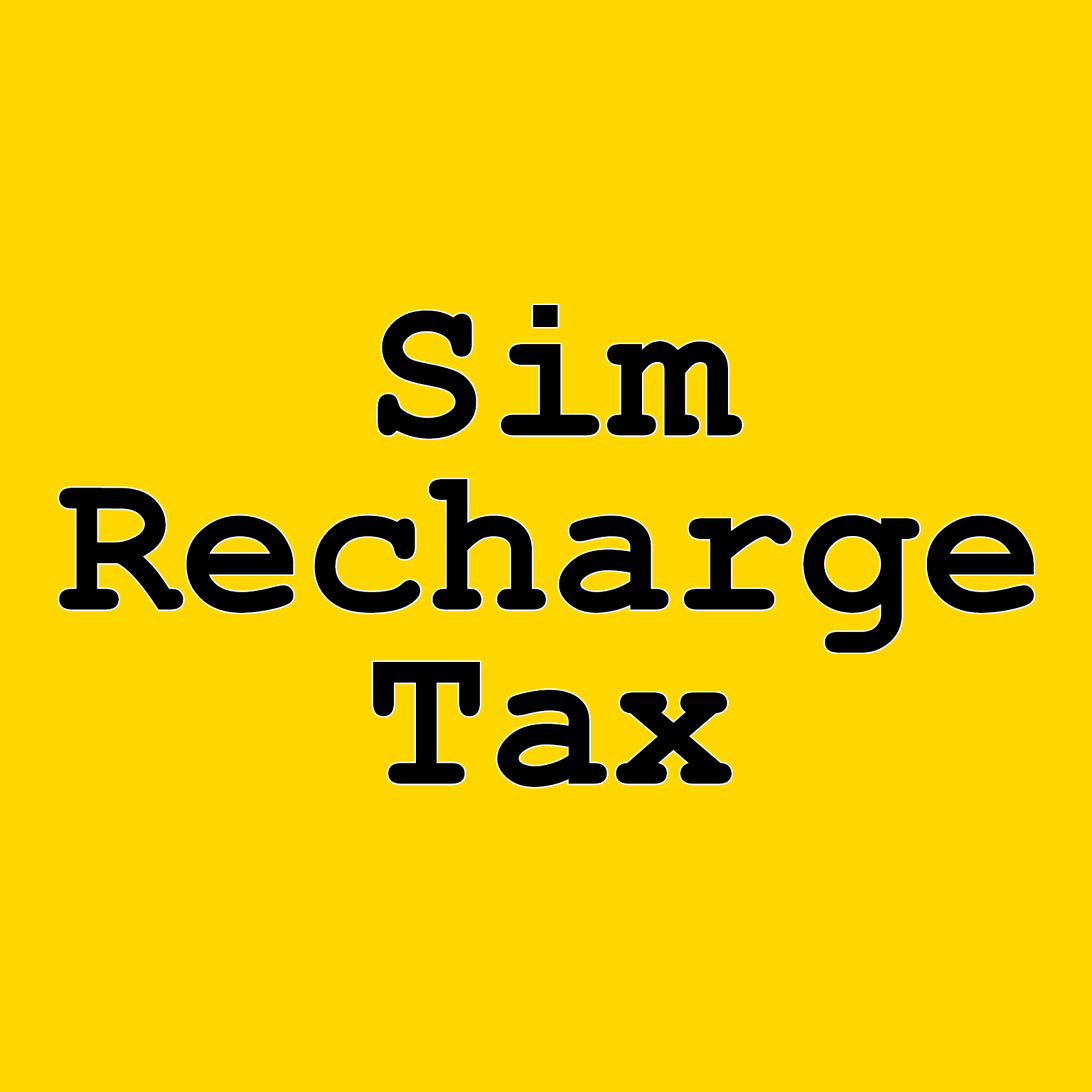
<style>
.page{position:relative;width:1092px;height:1092px;background:#ffd700}
.page>*{position:absolute;margin:0}
.t1{font:205.6px/174.2px "CourierNewPS-BoldMT";color:#000000}
</style>
<div class="page">
<p class="t1" style="left:59px;top:305px;width:975px;height:482px;text-align:center">Sim<br>Recharge<br>Tax</p>
</div>
